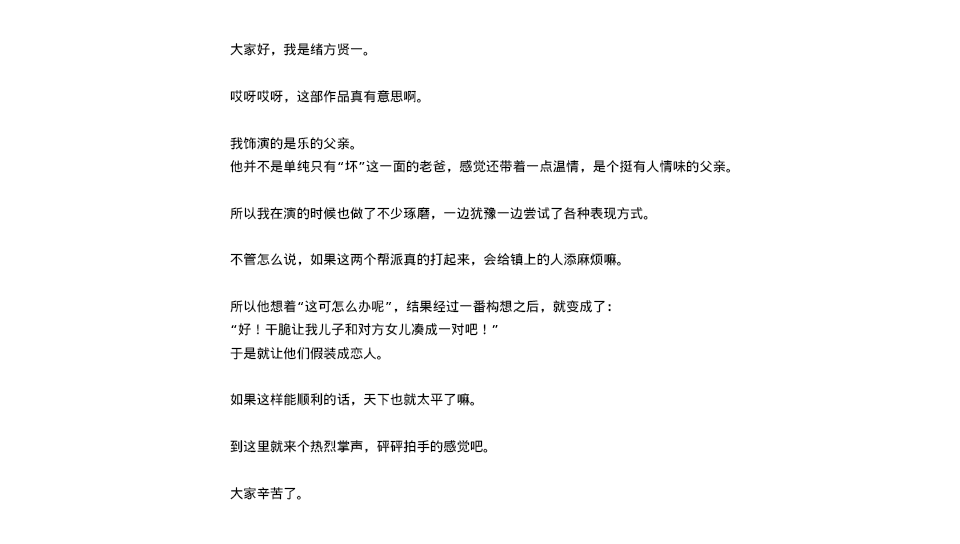
<style>
.page{position:relative;width:960px;height:544px;background:#ffffff}
.page>*{position:absolute;margin:0}
.t1{font:13.3px "WenQuanYiMicroHeiMono";color:#000000}
</style>
<div class="page">
<p class="t1" style="left:230px;top:43px;width:501px;height:457px">大家好，我是绪方贤一。<br><br>哎呀哎呀，这部作品真有意思啊。<br><br>我饰演的是乐的父亲。<br>他并不是单纯只有“坏”这一面的老爸，感觉还带着一点温情，是个挺有人情味的父亲。<br><br>所以我在演的时候也做了不少琢磨，一边犹豫一边尝试了各种表现方式。<br><br>不管怎么说，如果这两个帮派真的打起来，会给镇上的人添麻烦嘛。<br><br>所以他想着“这可怎么办呢”，结果经过一番构想之后，就变成了：<br>“好！干脆让我儿子和对方女儿凑成一对吧！”<br>于是就让他们假装成恋人。<br><br>如果这样能顺利的话，天下也就太平了嘛。<br><br>到这里就来个热烈掌声，砰砰拍手的感觉吧。<br><br>大家辛苦了。</p>
</div>
